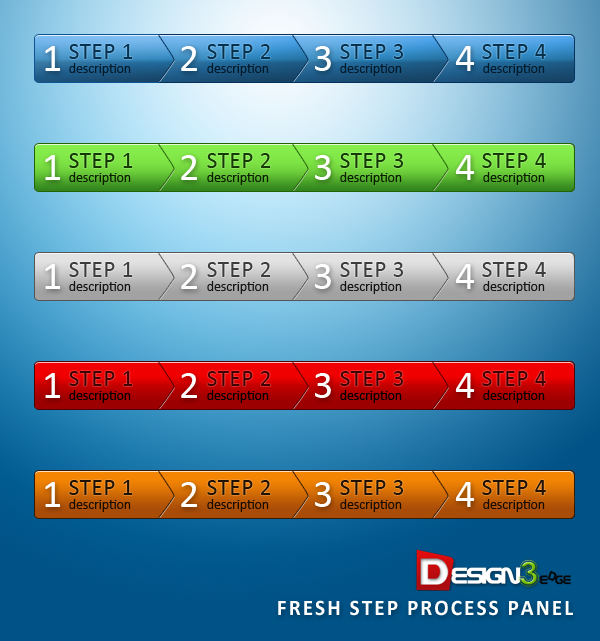
<style>
.page{position:relative;width:600px;height:641px}
.page>*{position:absolute;margin:0}
.t1{font:40.3px "Calibri";letter-spacing:0.025em;color:#ffffff}
.t2{font:23px "Calibri";letter-spacing:0.025em;color:#08314e}
.t3{font:14px "Calibri";letter-spacing:-0.01em;color:#031a2b}
.t4{font:23px "Calibri";letter-spacing:0.025em;color:#143801}
.t5{font:23px "Calibri";letter-spacing:0.025em;color:#163a03}
.t6{font:14px "Calibri";letter-spacing:-0.01em;color:#0b1e00}
.t7{font:14px "Calibri";letter-spacing:-0.01em;color:#0a1d00}
.t8{font:23px "Calibri";letter-spacing:0.025em;color:#3c3c3c}
.t9{font:14px "Calibri";letter-spacing:-0.01em;color:#141414}
.t10{font:23px "Calibri";letter-spacing:0.025em;color:#420000}
.t11{font:14px "Calibri";letter-spacing:-0.01em;color:#000000}
.t12{font:23px "Calibri";letter-spacing:0.025em;color:#211100}
.t13{font:14px "Calibri";letter-spacing:-0.01em;color:#180c00}
.t14{font:22.2px "Calibri-Bold";letter-spacing:0.1em;color:#ffffff;text-transform:uppercase;scale:0.95 1}
</style>
<div class="page">
<p class="t1" style="left:45px;top:46px;width:16px;height:25px">1</p>
<p class="t2" style="left:69px;top:44px;width:64px;height:15px">STEP 1</p>
<p class="t1" style="left:181px;top:46px;width:16px;height:25px">2</p>
<p class="t2" style="left:207px;top:44px;width:64px;height:15px">STEP 2</p>
<p class="t1" style="left:315px;top:46px;width:16px;height:25px">3</p>
<p class="t2" style="left:340px;top:44px;width:64px;height:15px">STEP 3</p>
<p class="t1" style="left:455px;top:46px;width:20px;height:25px">4</p>
<p class="t2" style="left:482px;top:44px;width:64px;height:15px">STEP 4</p>
<p class="t3" style="left:69px;top:63px;width:62px;height:13px">description</p>
<p class="t3" style="left:207px;top:63px;width:62px;height:13px">description</p>
<p class="t3" style="left:340px;top:63px;width:62px;height:13px">description</p>
<p class="t3" style="left:483px;top:63px;width:62px;height:13px">description</p>
<p class="t1" style="left:45px;top:155px;width:16px;height:25px">1</p>
<p class="t4" style="left:69px;top:153px;width:64px;height:15px">STEP <span class="t5">1</span></p>
<p class="t1" style="left:181px;top:155px;width:16px;height:25px">2</p>
<p class="t5" style="left:207px;top:153px;width:64px;height:15px">STEP 2</p>
<p class="t1" style="left:315px;top:155px;width:16px;height:25px">3</p>
<p class="t5" style="left:340px;top:153px;width:64px;height:15px">STEP 3</p>
<p class="t1" style="left:455px;top:155px;width:20px;height:25px">4</p>
<p class="t5" style="left:482px;top:153px;width:64px;height:15px">STEP 4</p>
<p class="t6" style="left:69px;top:172px;width:62px;height:13px">description</p>
<p class="t7" style="left:207px;top:172px;width:62px;height:13px">description</p>
<p class="t7" style="left:340px;top:172px;width:62px;height:13px">description</p>
<p class="t7" style="left:483px;top:172px;width:62px;height:13px">description</p>
<p class="t1" style="left:45px;top:264px;width:16px;height:25px">1</p>
<p class="t8" style="left:69px;top:262px;width:64px;height:15px">STEP 1</p>
<p class="t1" style="left:181px;top:264px;width:16px;height:25px">2</p>
<p class="t8" style="left:207px;top:262px;width:64px;height:15px">STEP 2</p>
<p class="t1" style="left:315px;top:264px;width:16px;height:25px">3</p>
<p class="t8" style="left:340px;top:262px;width:64px;height:15px">STEP 3</p>
<p class="t1" style="left:455px;top:264px;width:20px;height:25px">4</p>
<p class="t8" style="left:482px;top:262px;width:64px;height:15px">STEP 4</p>
<p class="t9" style="left:69px;top:281px;width:62px;height:13px">description</p>
<p class="t9" style="left:207px;top:281px;width:62px;height:13px">description</p>
<p class="t9" style="left:340px;top:281px;width:62px;height:13px">description</p>
<p class="t9" style="left:483px;top:281px;width:62px;height:13px">description</p>
<p class="t1" style="left:45px;top:373px;width:16px;height:25px">1</p>
<p class="t10" style="left:69px;top:371px;width:64px;height:15px">STEP 1</p>
<p class="t1" style="left:181px;top:373px;width:16px;height:25px">2</p>
<p class="t10" style="left:207px;top:371px;width:64px;height:15px">STEP 2</p>
<p class="t1" style="left:315px;top:373px;width:16px;height:25px">3</p>
<p class="t10" style="left:340px;top:371px;width:64px;height:15px">STEP 3</p>
<p class="t1" style="left:455px;top:373px;width:20px;height:25px">4</p>
<p class="t10" style="left:482px;top:371px;width:64px;height:15px">STEP 4</p>
<p class="t11" style="left:69px;top:390px;width:62px;height:13px">description</p>
<p class="t11" style="left:207px;top:390px;width:62px;height:13px">description</p>
<p class="t11" style="left:340px;top:390px;width:62px;height:13px">description</p>
<p class="t11" style="left:483px;top:390px;width:62px;height:13px">description</p>
<p class="t1" style="left:45px;top:482px;width:16px;height:25px">1</p>
<p class="t12" style="left:69px;top:480px;width:64px;height:15px">STEP 1</p>
<p class="t1" style="left:181px;top:482px;width:16px;height:25px">2</p>
<p class="t12" style="left:207px;top:480px;width:64px;height:15px">STEP 2</p>
<p class="t1" style="left:315px;top:482px;width:16px;height:25px">3</p>
<p class="t12" style="left:340px;top:480px;width:64px;height:15px">STEP 3</p>
<p class="t1" style="left:455px;top:482px;width:20px;height:25px">4</p>
<p class="t12" style="left:482px;top:480px;width:64px;height:15px">STEP 4</p>
<p class="t13" style="left:69px;top:499px;width:62px;height:13px">description</p>
<p class="t13" style="left:207px;top:499px;width:62px;height:13px">description</p>
<p class="t13" style="left:340px;top:499px;width:62px;height:13px">description</p>
<p class="t13" style="left:483px;top:499px;width:62px;height:13px">description</p>
<p class="t14" style="left:278px;top:600px;width:295px;height:16px">FRESH STEP PROCESS PANEL</p>
</div>
